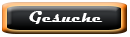
<style>
.page{position:relative;width:130px;height:37px}
.page>*{position:absolute;margin:0}
.t1{font:12px "Magneto-Bold";color:#ffffff}
</style>
<div class="page">
<p class="t1" style="left:29px;top:11px;width:74px;height:13px">Gesuche</p>
</div>
